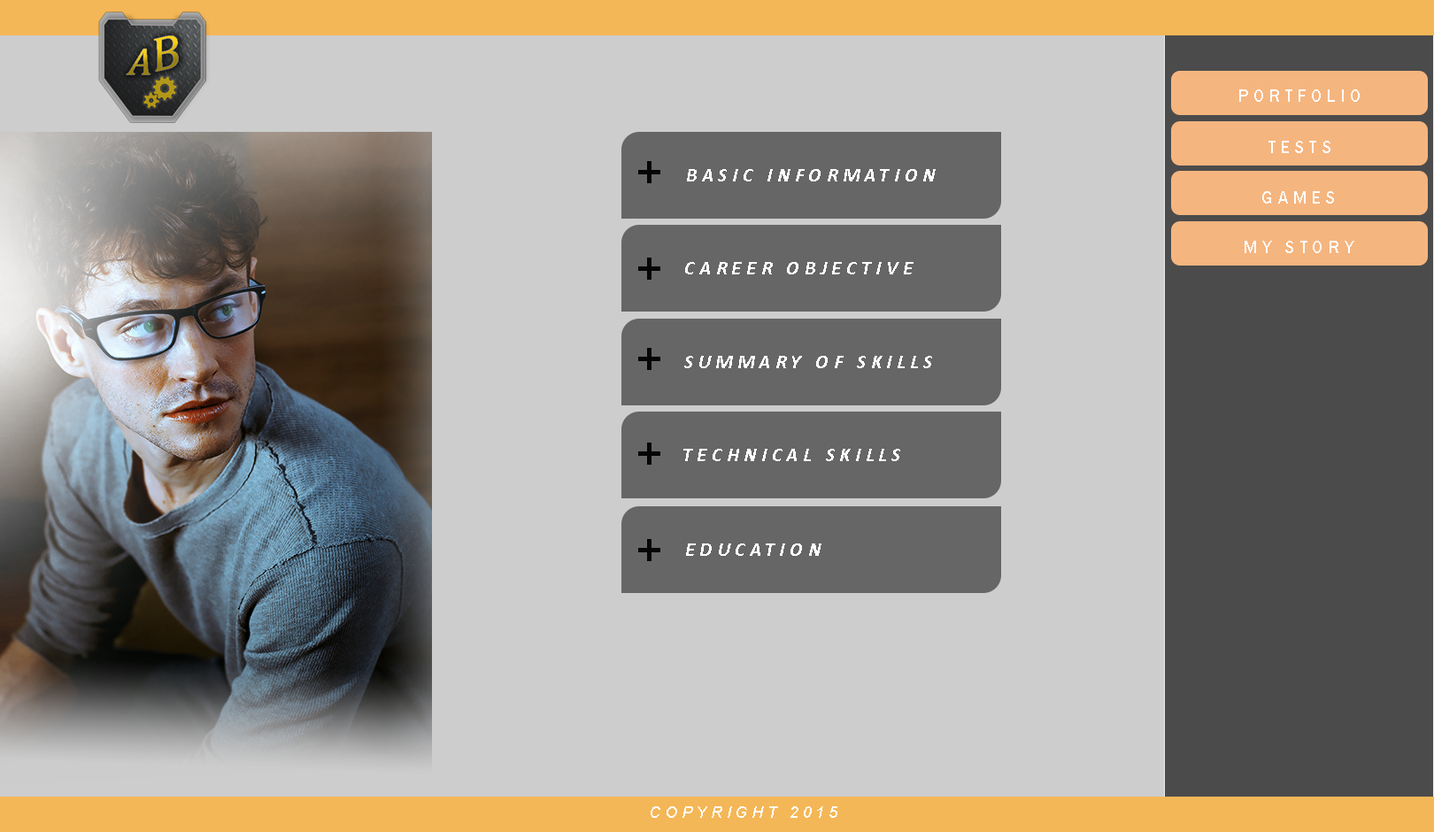
<style>
.page{position:relative;width:1434px;height:832px;background:#cdcdcd}
.page>*{position:absolute;margin:0}
.t1{font:17.7px "FranklinGothic-Medium";letter-spacing:0.26em;color:#ffffff;text-transform:uppercase}
.t2{font:19.5px "Calibri-BoldItalic";letter-spacing:0.26em;color:#ffffff;text-transform:uppercase}
.t3{font:15.9px "Arial-ItalicMT";letter-spacing:0.26em;color:#ffffff;text-transform:uppercase}
</style>
<div class="page">
<p class="t1" style="left:1239px;top:89px;width:120px;height:13px">Portfolio</p>
<p class="t1" style="left:1268px;top:141px;width:62px;height:12px">tests</p>
<p class="t2" style="left:687px;top:169px;width:248px;height:12px">basic information</p>
<p class="t1" style="left:1262px;top:191px;width:72px;height:13px">games</p>
<p class="t1" style="left:1244px;top:241px;width:110px;height:12px">my story</p>
<p class="t2" style="left:685px;top:262px;width:228px;height:12px">Career Objective</p>
<p class="t2" style="left:684px;top:356px;width:248px;height:12px">Summary of Skills</p>
<p class="t2" style="left:683px;top:449px;width:217px;height:12px">Technical Skills</p>
<p class="t2" style="left:686px;top:543px;width:135px;height:13px">Education</p>
<p class="t3" style="left:650px;top:806px;width:187px;height:12px">copyright 2015</p>
</div>
